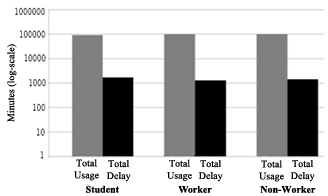
<style>
.page{position:relative;width:328px;height:196px;background:#ffffff}
.page>*{position:absolute;margin:0}
.t1{font:10px "TimesNewRomanPSMT";color:#000000}
.t2{font:10px "TimesNewRomanPS-BoldMT";color:#000000}
</style>
<div class="page">
<p class="t1" style="left:7px;top:44px;width:10px;height:78px;rotate:-90deg">Minutes (log-scale)</p>
<p class="t1" style="left:74px;top:159px;width:25px;height:22px;text-align:center">Total<br>Usage</p>
<p class="t1" style="left:106px;top:160px;width:25px;height:22px;text-align:center">Total<br>Delay</p>
<p class="t1" style="left:167px;top:159px;width:25px;height:22px;text-align:center">Total<br>Usage</p>
<p class="t1" style="left:198px;top:160px;width:25px;height:22px;text-align:center">Total<br>Delay</p>
<p class="t1" style="left:259px;top:160px;width:25px;height:22px;text-align:center">Total<br>Usage</p>
<p class="t1" style="left:290px;top:160px;width:25px;height:22px;text-align:center">Total<br>Delay</p>
<p class="t2" style="left:86px;top:185px;width:33px;height:8px">Student</p>
<p class="t2" style="left:178px;top:186px;width:34px;height:7px">Worker</p>
<p class="t2" style="left:260px;top:186px;width:56px;height:7px">Non-Worker</p>
</div>
